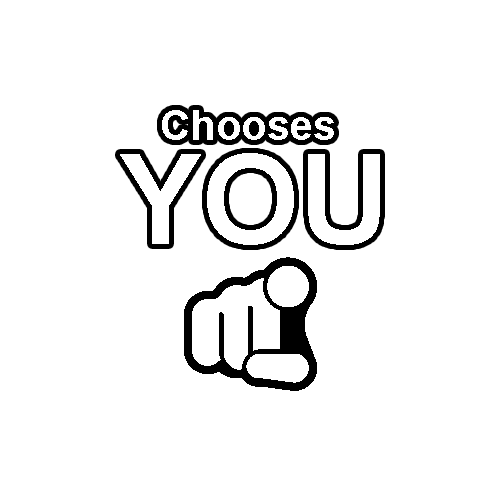
<style>
.page{position:relative;width:500px;height:500px;background:#ffffff}
.page>*{position:absolute;margin:0}
.t1{font:41.7px "Arial-BoldMT";color:#ffffff}
.t2{font:125px/104.2px "Arial-BoldMT";color:#ffffff}
</style>
<div class="page">
<p class="t1" style="left:120px;top:110px;width:260px;height:135px;text-align:center">Chooses <br><span class="t2">YOU</span></p>
</div>
